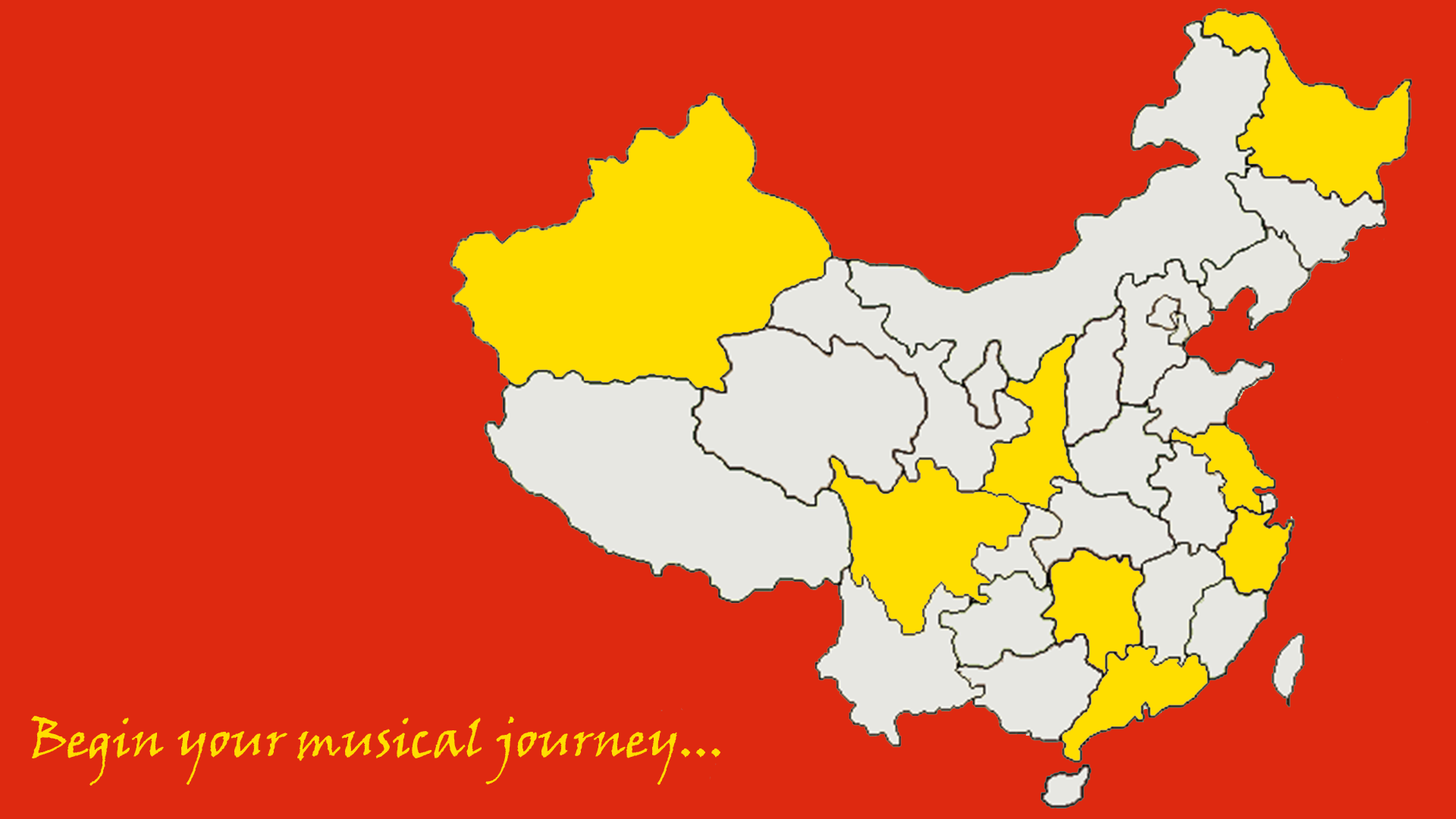
<style>
.page{position:relative;width:1456px;height:819px;background:#de2910}
.page>*{position:absolute;margin:0}
.t1{font:50.6px "VinerHandITC";color:#ffde00}
</style>
<div class="page">
<p class="t1" style="left:31px;top:716px;width:689px;height:70px">Begin your musical journey...</p>
</div>
